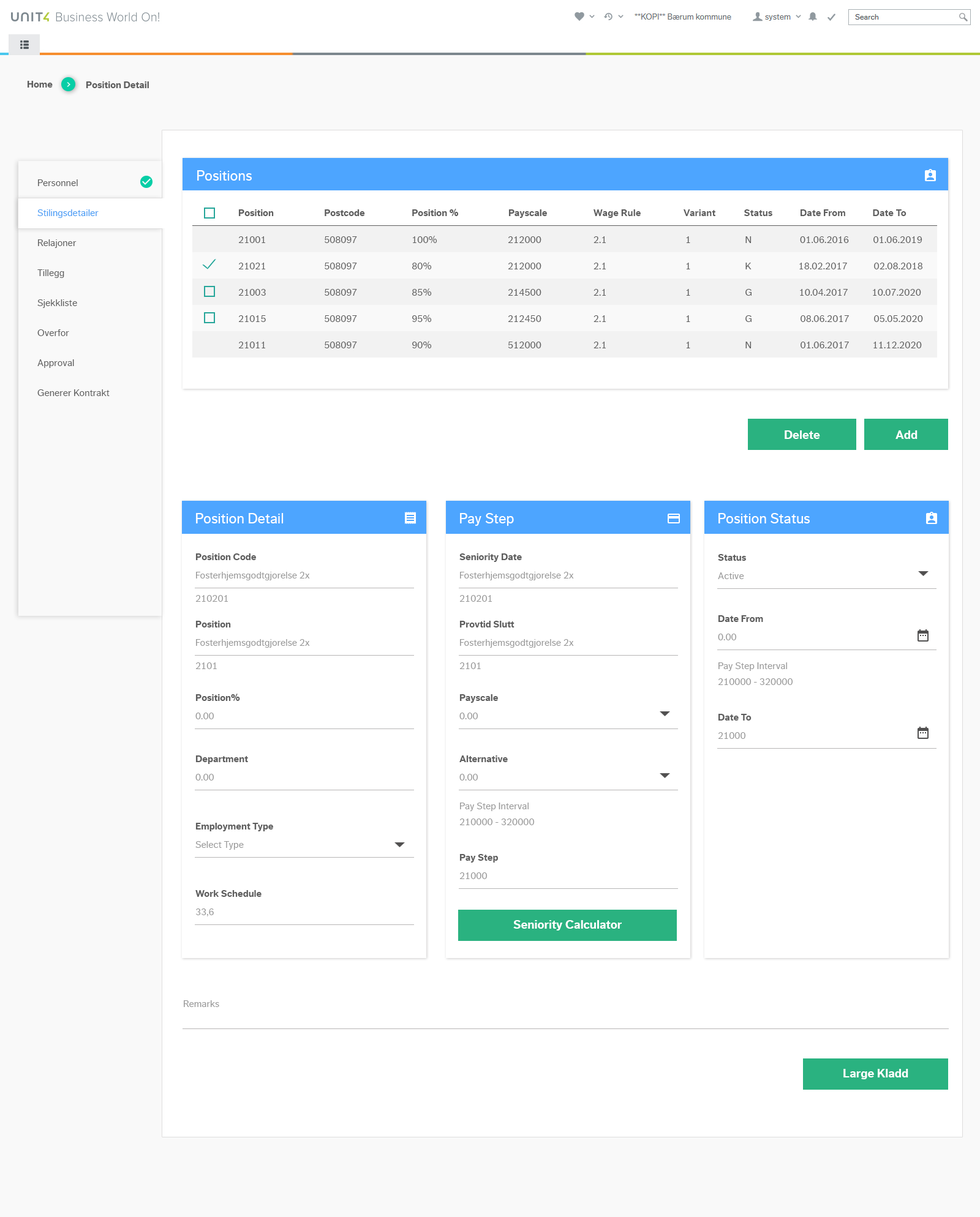
<style>
.page{position:relative;width:980px;height:1217px;background:#ffffff}
.page>*{position:absolute;margin:0}
.t1{font:9.8px "DagnyCompPro-Bold";color:#5e5e5e}
.t2{font:14.7px "DagnyCompPro";color:#ffffff}
.t3{font:9.8px/30px "DagnyCompPro";color:#5e5e5e}
.t4{font:9.8px/30px "DagnyCompPro";color:#449cf5}
.t5{font:9.8px "DagnyCompPro";color:#5e5e5e}
.t6{font:12.2px "DagnyCompPro-Bold";color:#ffffff}
.t7{font:9.8px "DagnyCompPro";color:#989898}
.t8{font:9.8px/15.9px "DagnyCompPro";color:#989898}
</style>
<div class="page">
<p class="t1" style="left:27px;top:81px;width:26px;height:7px">Home</p>
<p class="t1" style="left:86px;top:81px;width:63px;height:7px">Position Detail</p>
<p class="t2" style="left:197px;top:170px;width:55px;height:11px">Positions</p>
<p class="t3" style="left:37px;top:179px;width:73px;height:217px">Personnel<br><span class="t4">Stilingsdetailer<br></span>Relajoner<br>Tillegg  <br>Sjekkliste<br>Overfor<br>Approval<br>Generer Kontrakt</p>
<p class="t1" style="left:238px;top:209px;width:36px;height:7px">Position</p>
<p class="t1" style="left:325px;top:209px;width:40px;height:7px">Postcode</p>
<p class="t1" style="left:412px;top:209px;width:47px;height:7px">Position %</p>
<p class="t1" style="left:508px;top:209px;width:39px;height:9px">Payscale</p>
<p class="t1" style="left:593px;top:209px;width:47px;height:9px">Wage Rule</p>
<p class="t1" style="left:683px;top:209px;width:32px;height:7px">Variant</p>
<p class="t1" style="left:743px;top:209px;width:29px;height:7px">Status</p>
<p class="t1" style="left:800px;top:209px;width:45px;height:7px">Date From</p>
<p class="t1" style="left:872px;top:209px;width:34px;height:7px">Date To</p>
<p class="t5" style="left:238px;top:236px;width:27px;height:7px">21001</p>
<p class="t5" style="left:325px;top:236px;width:32px;height:7px">508097</p>
<p class="t5" style="left:413px;top:236px;width:24px;height:7px">100%</p>
<p class="t5" style="left:508px;top:236px;width:33px;height:7px">212000</p>
<p class="t5" style="left:593px;top:236px;width:13px;height:7px">2.1</p>
<p class="t5" style="left:686px;top:236px;width:4px;height:7px">1</p>
<p class="t5" style="left:745px;top:236px;width:6px;height:7px">N</p>
<p class="t5" style="left:800px;top:236px;width:49px;height:7px">01.06.2016</p>
<p class="t5" style="left:873px;top:236px;width:49px;height:7px">01.06.2019</p>
<p class="t5" style="left:238px;top:263px;width:27px;height:6px">21021</p>
<p class="t5" style="left:325px;top:263px;width:32px;height:6px">508097</p>
<p class="t5" style="left:412px;top:262px;width:20px;height:7px">80%</p>
<p class="t5" style="left:508px;top:263px;width:33px;height:6px">212000</p>
<p class="t5" style="left:593px;top:263px;width:13px;height:6px">2.1</p>
<p class="t5" style="left:686px;top:263px;width:4px;height:6px">1</p>
<p class="t5" style="left:745px;top:263px;width:6px;height:6px">K</p>
<p class="t5" style="left:799px;top:263px;width:48px;height:6px">18.02.2017</p>
<p class="t5" style="left:874px;top:263px;width:48px;height:6px">02.08.2018</p>
<p class="t5" style="left:238px;top:289px;width:28px;height:7px">21003</p>
<p class="t5" style="left:325px;top:289px;width:32px;height:7px">508097</p>
<p class="t5" style="left:412px;top:288px;width:20px;height:8px">85%</p>
<p class="t5" style="left:508px;top:289px;width:33px;height:7px">214500</p>
<p class="t5" style="left:593px;top:289px;width:13px;height:7px">2.1</p>
<p class="t5" style="left:686px;top:289px;width:4px;height:7px">1</p>
<p class="t5" style="left:745px;top:289px;width:6px;height:7px">G</p>
<p class="t5" style="left:800px;top:289px;width:47px;height:7px">10.04.2017</p>
<p class="t5" style="left:872px;top:289px;width:49px;height:7px">10.07.2020</p>
<p class="t5" style="left:238px;top:315px;width:28px;height:7px">21015</p>
<p class="t5" style="left:325px;top:315px;width:32px;height:7px">508097</p>
<p class="t5" style="left:412px;top:315px;width:20px;height:7px">95%</p>
<p class="t5" style="left:508px;top:315px;width:33px;height:7px">212450</p>
<p class="t5" style="left:593px;top:315px;width:13px;height:7px">2.1</p>
<p class="t5" style="left:686px;top:315px;width:4px;height:7px">1</p>
<p class="t5" style="left:745px;top:315px;width:6px;height:7px">G</p>
<p class="t5" style="left:800px;top:315px;width:49px;height:7px">08.06.2017</p>
<p class="t5" style="left:874px;top:315px;width:49px;height:7px">05.05.2020</p>
<p class="t5" style="left:238px;top:342px;width:27px;height:6px">21011</p>
<p class="t5" style="left:325px;top:342px;width:32px;height:6px">508097</p>
<p class="t5" style="left:412px;top:341px;width:20px;height:7px">90%</p>
<p class="t5" style="left:508px;top:342px;width:33px;height:6px">512000</p>
<p class="t5" style="left:593px;top:342px;width:13px;height:6px">2.1</p>
<p class="t5" style="left:686px;top:342px;width:4px;height:6px">1</p>
<p class="t5" style="left:745px;top:342px;width:6px;height:6px">N</p>
<p class="t5" style="left:800px;top:342px;width:49px;height:6px">01.06.2017</p>
<p class="t5" style="left:873px;top:342px;width:48px;height:6px">11.12.2020</p>
<p class="t6" style="left:784px;top:430px;width:36px;height:9px">Delete</p>
<p class="t6" style="left:895px;top:430px;width:22px;height:9px">Add</p>
<p class="t2" style="left:196px;top:513px;width:87px;height:10px">Position Detail</p>
<p class="t2" style="left:460px;top:513px;width:54px;height:13px">Pay Step</p>
<p class="t2" style="left:718px;top:513px;width:91px;height:10px">Position Status</p>
<p class="t1" style="left:195px;top:553px;width:61px;height:7px">Position Code</p>
<p class="t1" style="left:459px;top:553px;width:63px;height:9px">Seniority Date</p>
<p class="t1" style="left:718px;top:554px;width:28px;height:7px">Status</p>
<p class="t7" style="left:196px;top:572px;width:114px;height:8px">Fosterhjemsgodtgjorelse 2x</p>
<p class="t7" style="left:460px;top:572px;width:114px;height:8px">Fosterhjemsgodtgjorelse 2x</p>
<p class="t7" style="left:718px;top:572px;width:26px;height:7px">Active</p>
<p class="t7" style="left:195px;top:595px;width:33px;height:7px">210201</p>
<p class="t7" style="left:459px;top:595px;width:33px;height:7px">210201</p>
<p class="t1" style="left:718px;top:615px;width:45px;height:7px">Date From</p>
<p class="t1" style="left:195px;top:621px;width:36px;height:7px">Position</p>
<p class="t1" style="left:459px;top:621px;width:55px;height:7px">Provtid Slutt</p>
<p class="t7" style="left:196px;top:639px;width:114px;height:9px">Fosterhjemsgodtgjorelse 2x</p>
<p class="t7" style="left:460px;top:639px;width:114px;height:9px">Fosterhjemsgodtgjorelse 2x</p>
<p class="t7" style="left:718px;top:634px;width:19px;height:6px">0.00</p>
<p class="t7" style="left:195px;top:662px;width:22px;height:7px">2101</p>
<p class="t7" style="left:459px;top:662px;width:22px;height:7px">2101</p>
<p class="t8" style="left:718px;top:662px;width:75px;height:23px">Pay Step Interval<br>210000 - 320000</p>
<p class="t1" style="left:195px;top:694px;width:45px;height:7px">Position%</p>
<p class="t1" style="left:459px;top:694px;width:39px;height:9px">Payscale</p>
<p class="t7" style="left:195px;top:713px;width:19px;height:6px">0.00</p>
<p class="t7" style="left:459px;top:713px;width:19px;height:6px">0.00</p>
<p class="t1" style="left:718px;top:714px;width:33px;height:7px">Date To</p>
<p class="t7" style="left:718px;top:732px;width:28px;height:7px">21000</p>
<p class="t1" style="left:195px;top:756px;width:53px;height:8px">Department</p>
<p class="t1" style="left:459px;top:756px;width:49px;height:6px">Alternative</p>
<p class="t7" style="left:195px;top:774px;width:19px;height:7px">0.00</p>
<p class="t7" style="left:459px;top:774px;width:19px;height:7px">0.00</p>
<p class="t8" style="left:459px;top:803px;width:76px;height:22px">Pay Step Interval<br>210000 - 320000</p>
<p class="t1" style="left:195px;top:823px;width:78px;height:8px">Employment Type</p>
<p class="t7" style="left:195px;top:841px;width:49px;height:9px">Select Type</p>
<p class="t1" style="left:459px;top:854px;width:39px;height:9px">Pay Step</p>
<p class="t7" style="left:459px;top:872px;width:28px;height:7px">21000</p>
<p class="t1" style="left:195px;top:890px;width:66px;height:7px">Work Schedule</p>
<p class="t7" style="left:196px;top:909px;width:18px;height:8px">33,6</p>
<p class="t6" style="left:513px;top:920px;width:108px;height:11px">Seniority Calculator</p>
<p class="t7" style="left:184px;top:1000px;width:35px;height:7px">Remarks</p>
<p class="t6" style="left:843px;top:1069px;width:65px;height:10px">Large Kladd</p>
</div>
